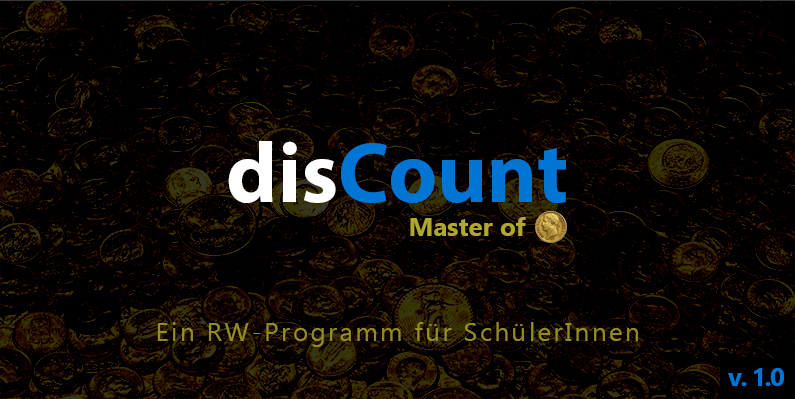
<style>
.page{position:relative;width:795px;height:399px;background:#000000}
.page>*{position:absolute;margin:0}
.t1{font:85.8px "MyriadPro-Bold";color:#0075d4}
.t2{font:85.8px "MyriadPro-Bold";color:#ffffff}
.t3{font:25.8px "Gadugi-Bold";color:#afa82c}
.t4{font:25.8px "Gadugi";letter-spacing:0.1em;color:#928b23}
.t5{font:25.8px "Gadugi-Bold";letter-spacing:-0.06em;color:#0075d4}
</style>
<div class="page">
<p class="t1" style="left:228px;top:141px;width:338px;height:62px"><span class="t2">dis</span>Count</p>
<p class="t3" style="left:410px;top:217px;width:116px;height:19px">Master of</p>
<p class="t4" style="left:157px;top:322px;width:481px;height:25px">Ein RW-Programm für SchülerInnen</p>
<p class="t5" style="left:728px;top:368px;width:56px;height:18px">v. 1.0</p>
</div>
